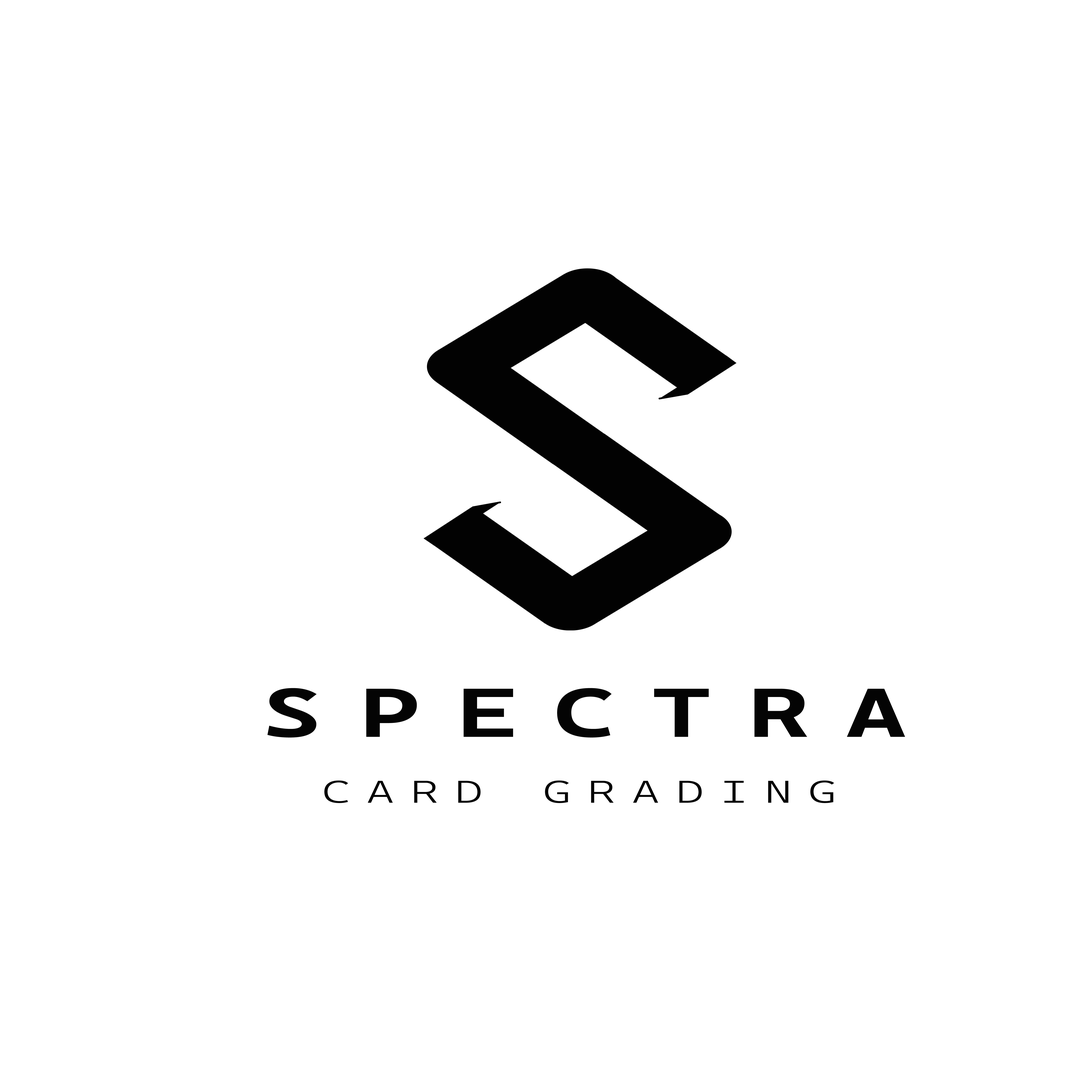
<style>
.page{position:relative;width:1092px;height:1092px;background:#ffffff}
.page>*{position:absolute;margin:0}
.t1{font:69.3px "CascadiaCodeRoman-Bold";letter-spacing:0.35em;color:#040404;scale:1.5 1}
.t2{font:31.5px "CascadiaCodeRoman-Light";letter-spacing:0.35em;color:#040404;scale:1.5 1}
</style>
<div class="page">
<p class="t1" style="left:267px;top:688px;width:638px;height:50px">SPECTRA</p>
<p class="t2" style="left:324px;top:780px;width:510px;height:23px">CARD GRADING</p>
</div>
